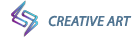
<style>
.page{position:relative;width:134px;height:38px;background:#ffffff}
.page>*{position:absolute;margin:0}
.t1{font:14px "MyriadPro-It";color:#517592;font-weight:bold}
</style>
<div class="page">
<p class="t1" style="left:48px;top:15px;width:84px;height:12px">CREATIVE ART</p>
</div>
